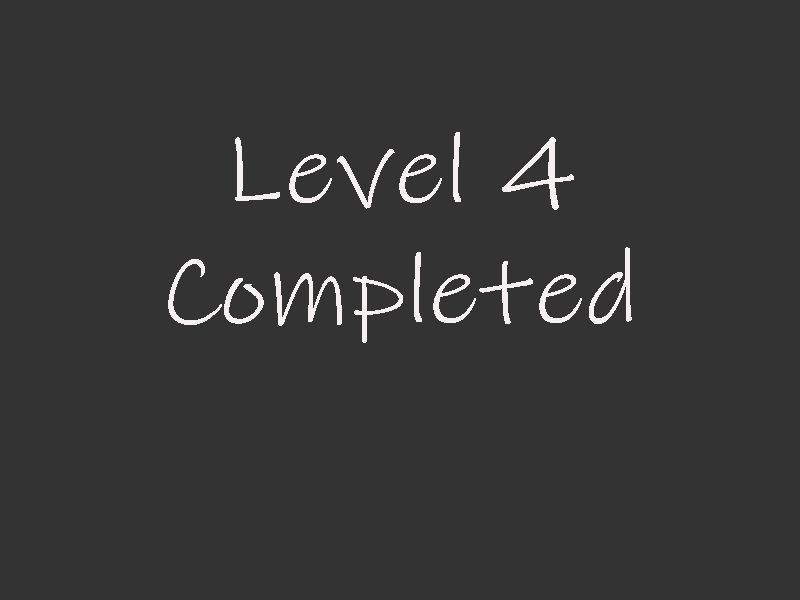
<style>
.page{position:relative;width:800px;height:600px;background:#333333}
.page>*{position:absolute;margin:0}
.t1{font:100px "InkFree";color:#f6f1f1;scale:1.1 1}
</style>
<div class="page">
<p class="t1" style="left:168px;top:132px;width:464px;height:211px;text-align:center">Level 4<br>Completed</p>
</div>
